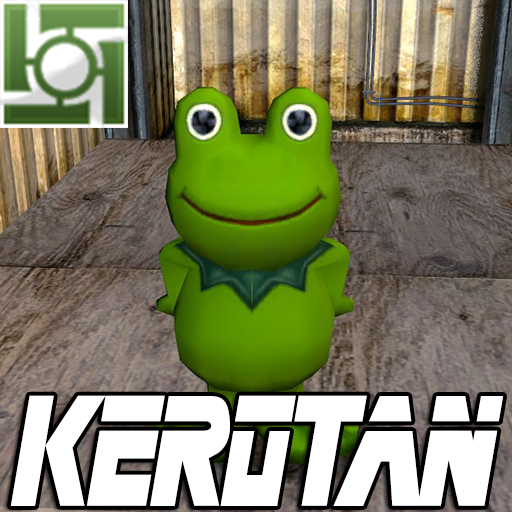
<style>
.page{position:relative;width:512px;height:512px}
.page>*{position:absolute;margin:0}
.t1{font:121.3px "MetalGear";letter-spacing:-0.02em;color:#ffffff;scale:0.77 1}
</style>
<div class="page">
<p class="t1" style="left:11px;top:395px;width:492px;height:111px">kerotan</p>
</div>
